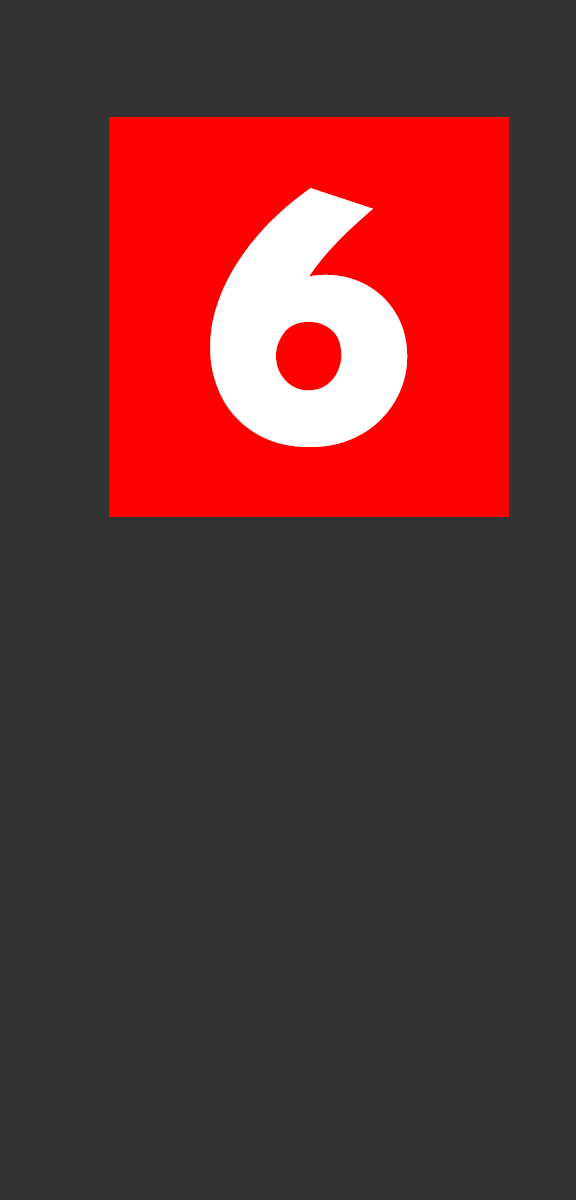
<style>
.page{position:relative;width:576px;height:1200px;background:#333333}
.page>*{position:absolute;margin:0}
.t1{font:372px "GillSans-Bold";color:#ffffff}
</style>
<div class="page">
<p class="t1" style="left:210px;top:188px;width:198px;height:259px">6</p>
</div>
